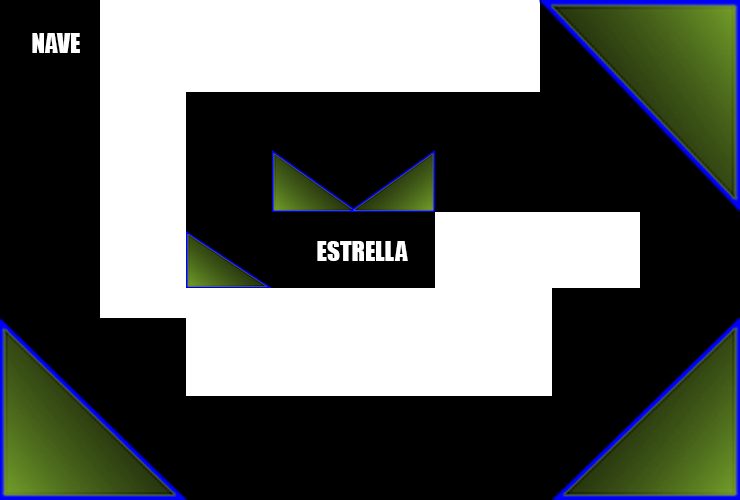
<style>
.page{position:relative;width:740px;height:500px;background:#000000}
.page>*{position:absolute;margin:0}
.t1{font:25px "Impact";color:#ffffff}
</style>
<div class="page">
<p class="t1" style="left:32px;top:33px;width:48px;height:20px">NAVE</p>
<p class="t1" style="left:317px;top:241px;width:91px;height:20px">ESTRELLA</p>
</div>
